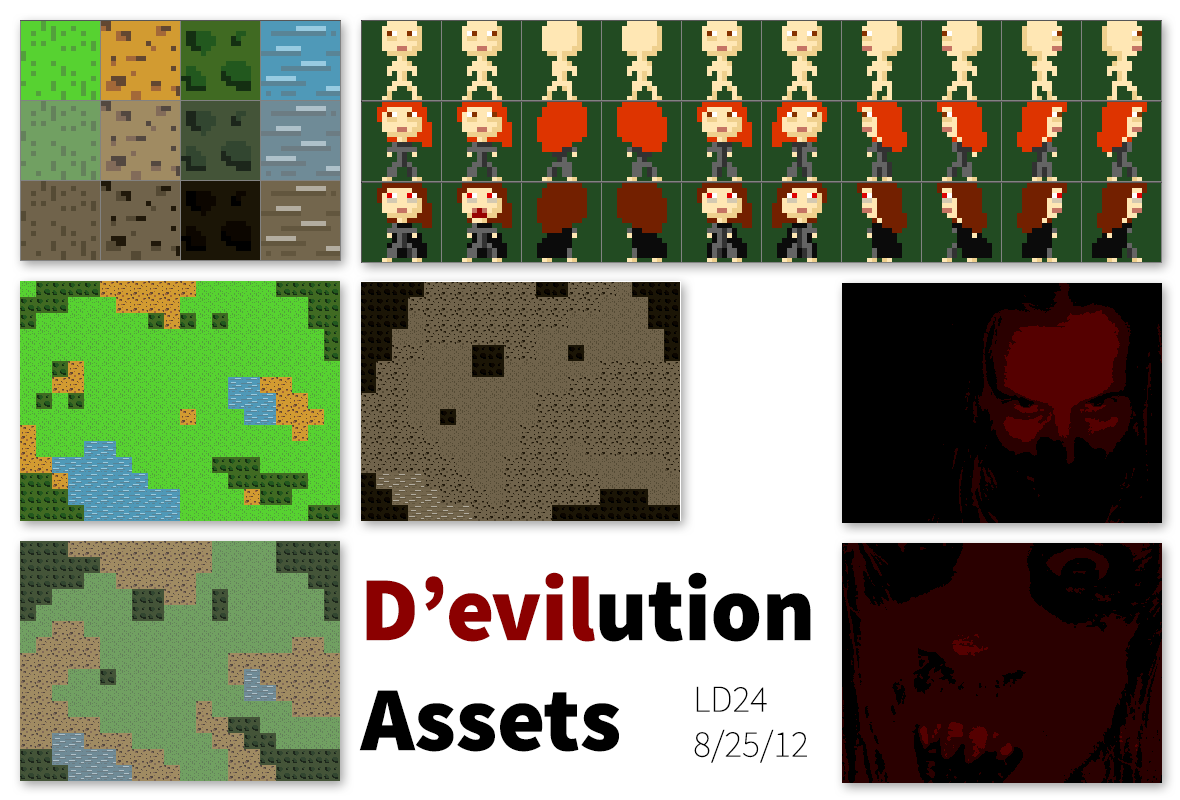
<style>
.page{position:relative;width:1180px;height:800px}
.page>*{position:absolute;margin:0}
.t1{font:91.7px "SourceSansPro-Black";color:#000000}
.t2{font:91.7px "SourceSansPro-Black";color:#8b0000}
.t3{font:37.5px "SourceSansPro-ExtraLight";color:#000000}
</style>
<div class="page">
<p class="t1" style="left:359px;top:572px;width:452px;height:180px"><span class="t2">D’evil</span>ution<br>Assets</p>
<p class="t3" style="left:694px;top:686px;width:113px;height:77px">LD24<br>8/25/12</p>
</div>
